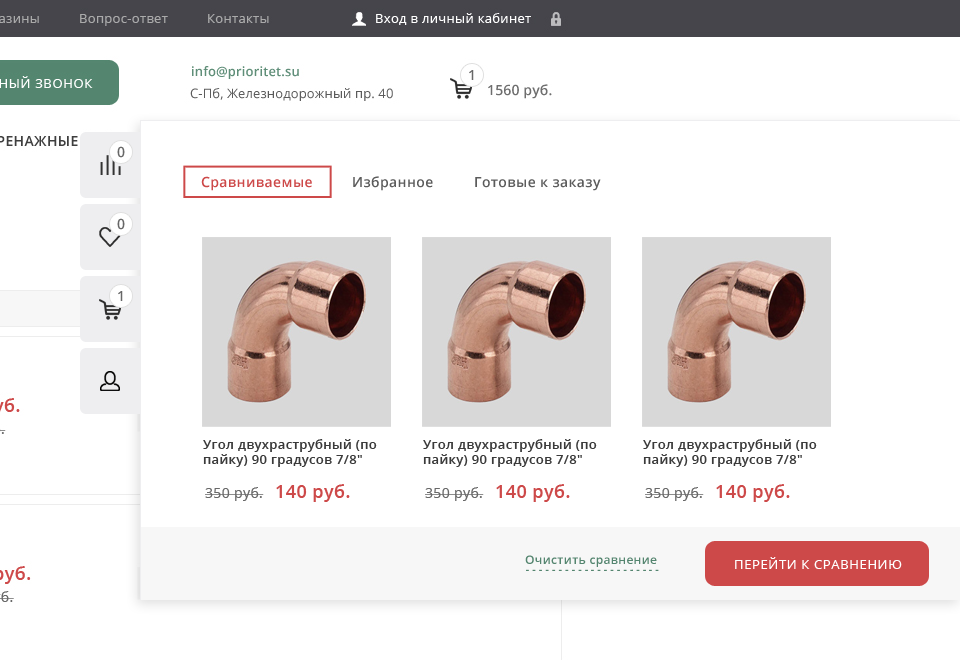
<style>
.page{position:relative;width:960px;height:660px;background:#ffffff}
.page>*{position:absolute;margin:0}
.t1{font:14px "OpenSans-Semibold";letter-spacing:0.025em;color:#676767;text-transform:uppercase}
.t2{font:14px "OpenSans-Semibold";letter-spacing:0.025em;color:#cd4949}
.t3{font:14px "OpenSans-Semibold";letter-spacing:0.025em;color:#5c5c5c}
.t4{font:13px "OpenSans-Semibold";letter-spacing:0.025em;color:#3a3a3a}
.t5{font:18px "OpenSans-Semibold";letter-spacing:0.025em;color:#cd4949}
.t6{font:14px "OpenSans";letter-spacing:0.025em;color:#696969}
.t7{font:12px "OpenSans-Semibold";letter-spacing:0.025em;color:#54856f}
.t8{font:13px "OpenSans";letter-spacing:0.05em;color:#ffffff;text-transform:uppercase}
</style>
<div class="page">
<p class="t1" style="left:117px;top:146px;width:8px;height:12px">0</p>
<p class="t2" style="left:201px;top:176px;width:111px;height:15px">Сравниваемые</p>
<p class="t3" style="left:353px;top:176px;width:80px;height:15px">Избранное</p>
<p class="t3" style="left:475px;top:177px;width:126px;height:14px">Готовые к заказу</p>
<p class="t1" style="left:117px;top:218px;width:8px;height:12px">0</p>
<p class="t1" style="left:118px;top:291px;width:5px;height:10px">1</p>
<p class="t4" style="left:203px;top:439px;width:174px;height:28px">Угол двухраструбный (по пайку) 90 градусов 7/8"</p>
<p class="t4" style="left:423px;top:439px;width:174px;height:28px">Угол двухраструбный (по пайку) 90 градусов 7/8"</p>
<p class="t4" style="left:643px;top:439px;width:174px;height:28px">Угол двухраструбный (по пайку) 90 градусов 7/8"</p>
<p class="t5" style="left:276px;top:484px;width:74px;height:18px">140 руб.</p>
<p class="t5" style="left:496px;top:484px;width:74px;height:18px">140 руб.</p>
<p class="t5" style="left:716px;top:484px;width:74px;height:18px">140 руб.</p>
<p class="t6" style="left:205px;top:487px;width:59px;height:14px">350 руб.</p>
<p class="t6" style="left:425px;top:487px;width:59px;height:14px">350 руб.</p>
<p class="t6" style="left:645px;top:487px;width:59px;height:14px">350 руб.</p>
<p class="t7" style="left:525px;top:555px;width:132px;height:12px">Очистить сравнение</p>
<p class="t8" style="left:735px;top:557px;width:167px;height:12px">перейти к сравнению</p>
</div>
